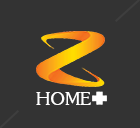
<style>
.page{position:relative;width:140px;height:128px;background:#333333}
.page>*{position:absolute;margin:0}
.t1{font:29px "JasmineUPC";color:#ffffff}
</style>
<div class="page">
<p class="t1" style="left:36px;top:92px;width:55px;height:13px">HOME</p>
</div>
